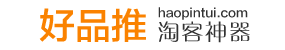
<style>
.page{position:relative;width:285px;height:50px;background:#ffffff}
.page>*{position:absolute;margin:0}
.t1{font:36px "FZLTZHK--GBK1-0";color:#fa8200}
.t2{font:12px "FZLTZHK--GBK1-0";color:#333333}
</style>
<div class="page">
<p class="t1" style="left:39px;top:8px;width:107px;height:34px">好品推</p>
<p class="t2" style="left:158px;top:7px;width:90px;height:13px">haopintui.com</p>
</div>
